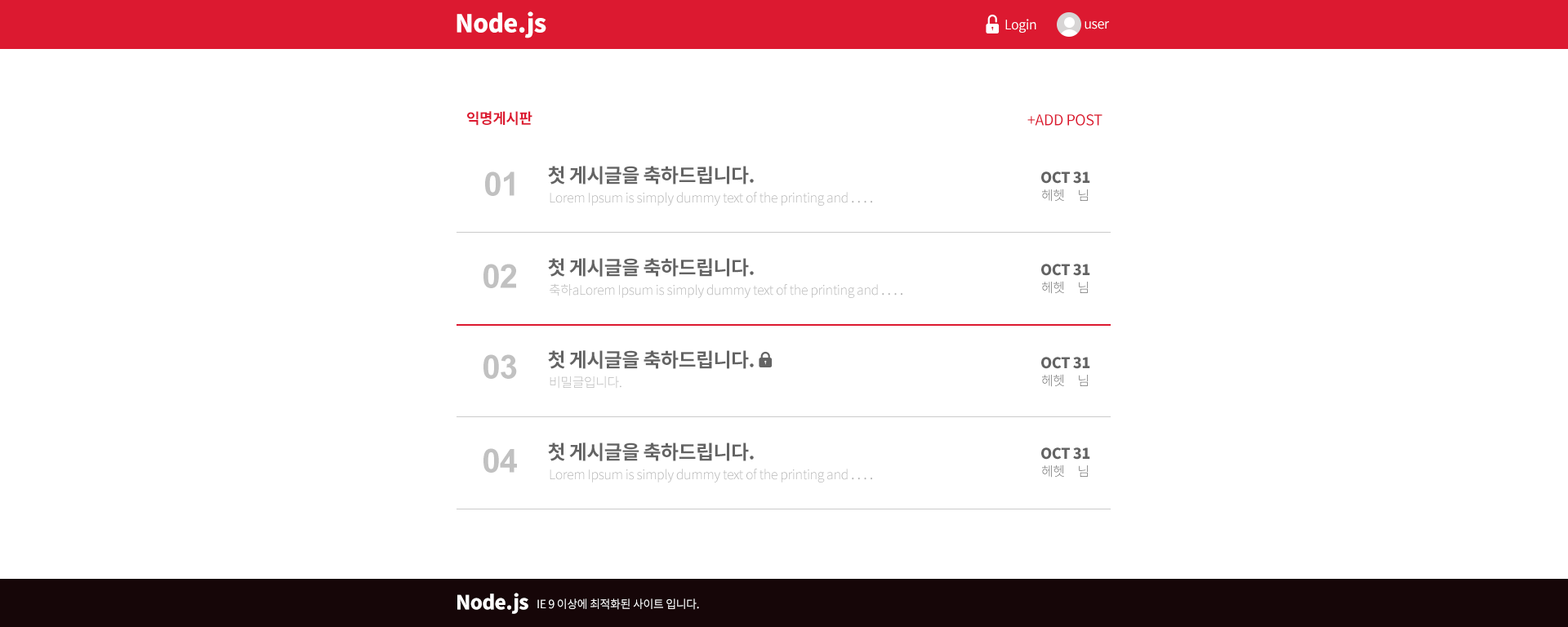
<style>
.page{position:relative;width:1568px;height:627px;background:#ffffff}
.page>*{position:absolute;margin:0}
.t1{font:24.5px "NotoSansCJKkr-Black";letter-spacing:-0.025em;color:#ffffff}
.t2{font:13.1px "NotoSansCJKkr-Regular";letter-spacing:-0.025em;color:#ffffff}
.t3{font:14.7px "NotoSansCJKkr-Bold";letter-spacing:-0.025em;color:#dc1930}
.t4{font:14.7px "NotoSansCJKkr-Regular";letter-spacing:-0.025em;color:#dc1930}
.t5{font:32.7px "Arial-BoldMT";letter-spacing:-0.025em;color:#c1c1c1}
.t6{font:19.6px "NotoSansCJKkr-Bold";letter-spacing:-0.025em;color:#636363}
.t7{font:14.7px "NotoSansCJKkr-Black";letter-spacing:-0.025em;color:#636363}
.t8{font:13.1px "NotoSansCJKkr-Light";letter-spacing:-0.025em;color:#b6b6b6}
.t9{font:13.1px "NotoSansCJKkr-Light";letter-spacing:-0.025em}
.t10{font:19.6px "NotoSansCJKkr-Black";letter-spacing:-0.025em;color:#ffffff}
.t11{font:11.4px "NotoSansCJKkr-Regular";letter-spacing:-0.025em;color:#ffffff}
</style>
<div class="page">
<p class="t1" style="left:457px;top:11px;width:89px;height:27px">Node.js</p>
<p class="t2" style="left:1005px;top:19px;width:31px;height:14px">Login</p>
<p class="t2" style="left:1085px;top:21px;width:24px;height:8px">user</p>
<p class="t3" style="left:467px;top:111px;width:65px;height:15px">익명게시판</p>
<p class="t4" style="left:1027px;top:114px;width:75px;height:12px">+ADD POST</p>
<p class="t5" style="left:485px;top:172px;width:29px;height:24px">01</p>
<p class="t6" style="left:548px;top:166px;width:206px;height:19px">첫 게시글을 축하드립니다.</p>
<p class="t7" style="left:1041px;top:172px;width:49px;height:12px">OCT 31</p>
<p class="t8" style="left:550px;top:192px;width:322px;height:14px">Lorem Ipsum is simply dummy text of the printing and ．．．．</p>
<p class="t9" style="left:1042px;top:189px;width:46px;height:13px">헤헷　님</p>
<p class="t5" style="left:483px;top:264px;width:33px;height:24px">02</p>
<p class="t6" style="left:548px;top:258px;width:206px;height:19px">첫 게시글을 축하드립니다.</p>
<p class="t7" style="left:1041px;top:264px;width:49px;height:12px">OCT 31</p>
<p class="t9" style="left:1042px;top:281px;width:46px;height:13px">헤헷　님</p>
<p class="t8" style="left:550px;top:283px;width:352px;height:15px">축하aLorem Ipsum is simply dummy text of the printing and ．．．．</p>
<p class="t6" style="left:548px;top:350px;width:206px;height:19px">첫 게시글을 축하드립니다.</p>
<p class="t5" style="left:483px;top:354px;width:34px;height:25px">03</p>
<p class="t7" style="left:1041px;top:357px;width:49px;height:12px">OCT 31</p>
<p class="t8" style="left:550px;top:376px;width:71px;height:13px">비밀글입니다.</p>
<p class="t9" style="left:1042px;top:374px;width:46px;height:13px">헤헷　님</p>
<p class="t5" style="left:483px;top:448px;width:34px;height:25px">04</p>
<p class="t6" style="left:548px;top:443px;width:206px;height:18px">첫 게시글을 축하드립니다.</p>
<p class="t7" style="left:1041px;top:448px;width:49px;height:12px">OCT 31</p>
<p class="t8" style="left:550px;top:469px;width:322px;height:14px">Lorem Ipsum is simply dummy text of the printing and ．．．．</p>
<p class="t9" style="left:1042px;top:465px;width:46px;height:13px">헤헷　님</p>
<p class="t10" style="left:457px;top:593px;width:71px;height:21px">Node.js</p>
<p class="t11" style="left:537px;top:599px;width:162px;height:11px">IE 9 이상에 최적화된 사이트 입니다.</p>
</div>
